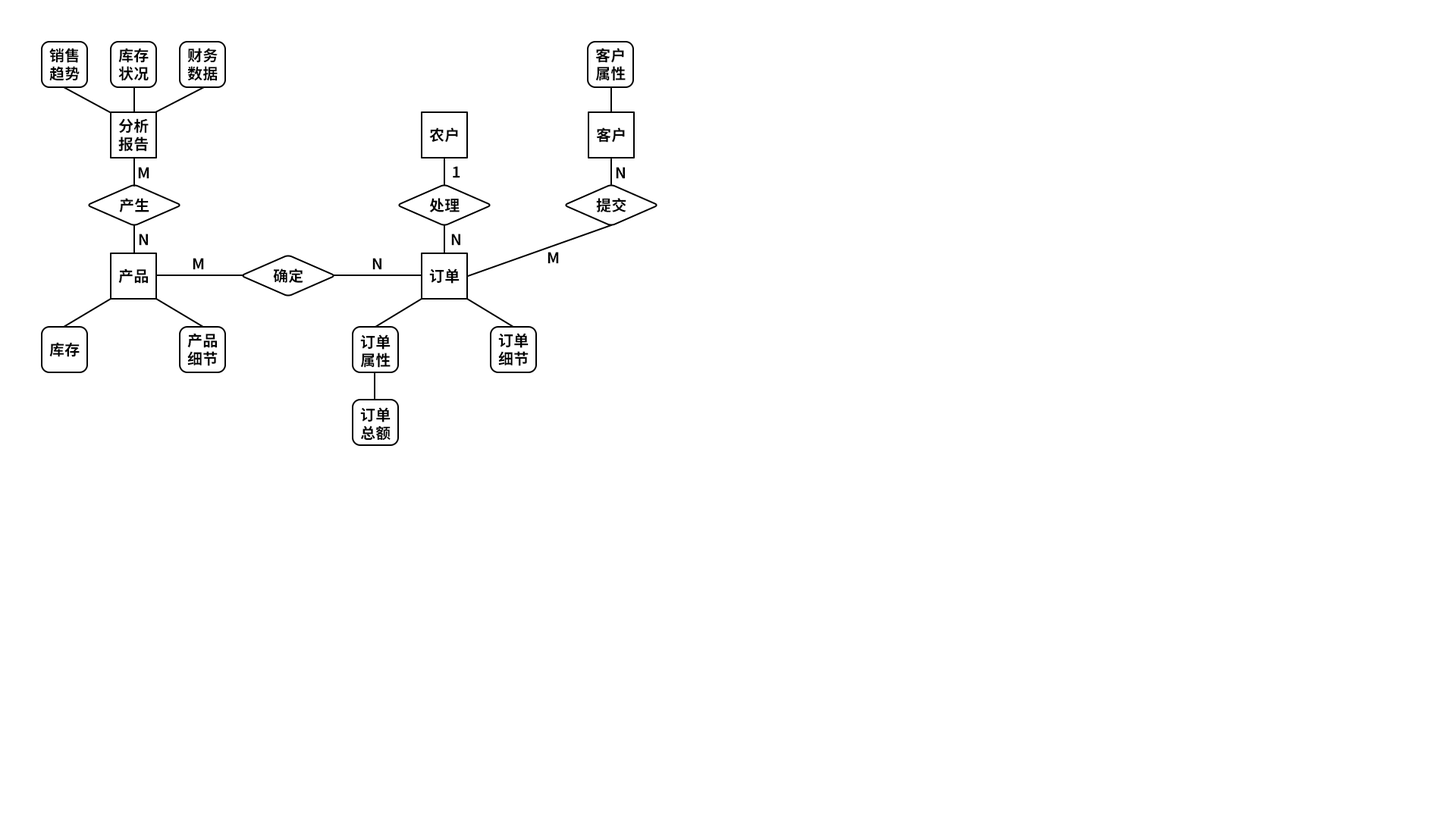
<style>
.page{position:relative;width:1456px;height:819px;background:#ffffff}
.page>*{position:absolute;margin:0}
.t1{font:15.2px "SourceHanSansCN-Bold";letter-spacing:0.02em;color:#000000}
</style>
<div class="page">
<p class="t1" style="left:49px;top:48px;width:31px;height:33px;text-align:center">销售<br>趋势</p>
<p class="t1" style="left:118px;top:48px;width:31px;height:33px;text-align:center">库存<br>状况</p>
<p class="t1" style="left:187px;top:48px;width:31px;height:33px;text-align:center">财务<br>数据</p>
<p class="t1" style="left:595px;top:48px;width:31px;height:33px;text-align:center">客户<br>属性</p>
<p class="t1" style="left:118px;top:118px;width:31px;height:34px;text-align:center">分析<br>报告</p>
<p class="t1" style="left:429px;top:127px;width:29px;height:16px">农户</p>
<p class="t1" style="left:596px;top:127px;width:29px;height:16px">客户</p>
<p class="t1" style="left:138px;top:167px;width:11px;height:12px">M</p>
<p class="t1" style="left:453px;top:166px;width:7px;height:12px">1</p>
<p class="t1" style="left:616px;top:167px;width:9px;height:12px">N</p>
<p class="t1" style="left:119px;top:198px;width:30px;height:14px">产生</p>
<p class="t1" style="left:429px;top:198px;width:31px;height:14px">处理</p>
<p class="t1" style="left:596px;top:198px;width:30px;height:14px">提交</p>
<p class="t1" style="left:139px;top:234px;width:9px;height:12px">N</p>
<p class="t1" style="left:451px;top:234px;width:9px;height:12px">N</p>
<p class="t1" style="left:193px;top:258px;width:11px;height:12px">M</p>
<p class="t1" style="left:372px;top:258px;width:9px;height:12px">N</p>
<p class="t1" style="left:548px;top:252px;width:11px;height:12px">M</p>
<p class="t1" style="left:118px;top:268px;width:30px;height:16px">产品</p>
<p class="t1" style="left:273px;top:268px;width:30px;height:15px">确定</p>
<p class="t1" style="left:429px;top:268px;width:31px;height:16px">订单</p>
<p class="t1" style="left:187px;top:333px;width:31px;height:33px;text-align:center">产品<br>细节</p>
<p class="t1" style="left:360px;top:334px;width:31px;height:34px;text-align:center">订单<br>属性</p>
<p class="t1" style="left:498px;top:333px;width:31px;height:33px;text-align:center">订单<br>细节</p>
<p class="t1" style="left:49px;top:342px;width:31px;height:15px">库存</p>
<p class="t1" style="left:360px;top:407px;width:31px;height:34px;text-align:center">订单<br>总额</p>
</div>
